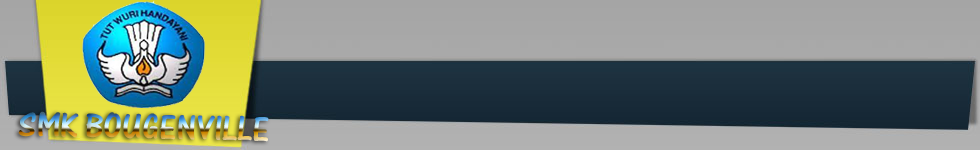
<style>
.page{position:relative;width:980px;height:150px}
.page>*{position:absolute;margin:0}
.t1{font:36.4px "OneStrokeScriptLetPlain"}
</style>
<div class="page">
<p class="t1" style="left:18px;top:111px;width:251px;height:31px;rotate:1deg">SMK BOUGENVILLE</p>
</div>
